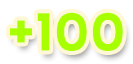
<style>
.page{position:relative;width:133px;height:64px;background:#ffffff}
.page>*{position:absolute;margin:0}
.t1{font:52.8px "Righteous-Regular";letter-spacing:0.04em;color:#a8ff00}
</style>
<div class="page">
<p class="t1" style="left:10px;top:12px;width:113px;height:39px">+100</p>
</div>
